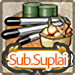
<style>
.page{position:relative;width:75px;height:75px}
.page>*{position:absolute;margin:0}
.t1{font:16px "AdobeClean-Regular";letter-spacing:-0.08em;color:#ff5a00}
</style>
<div class="page">
<p class="t1" style="left:9px;top:53px;width:58px;height:16px">Sub.Suplai</p>
</div>
